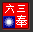
<style>
.page{position:relative;width:33px;height:32px;background:#f20000}
.page>*{position:absolute;margin:0}
.t1{font:10.4px "SimSun";color:#ffffff}
.t2{font:11.7px "SimSun";color:#ffffff}
</style>
<div class="page">
<p class="t1" style="left:5px;top:4px;width:20px;height:9px">六三</p>
<p class="t2" style="left:16px;top:15px;width:11px;height:12px">奉</p>
</div>
